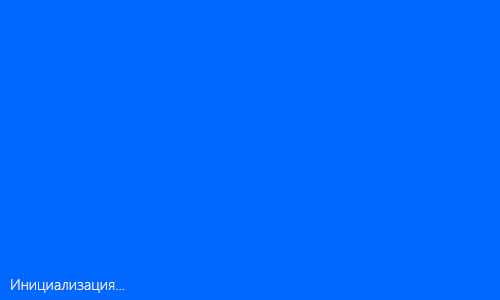
<style>
.page{position:relative;width:500px;height:300px;background:#0068ff}
.page>*{position:absolute;margin:0}
.t1{font:15px "SegoeUI-Light";color:#ffffff}
</style>
<div class="page">
<p class="t1" style="left:11px;top:279px;width:113px;height:14px">Инициализация...</p>
</div>
